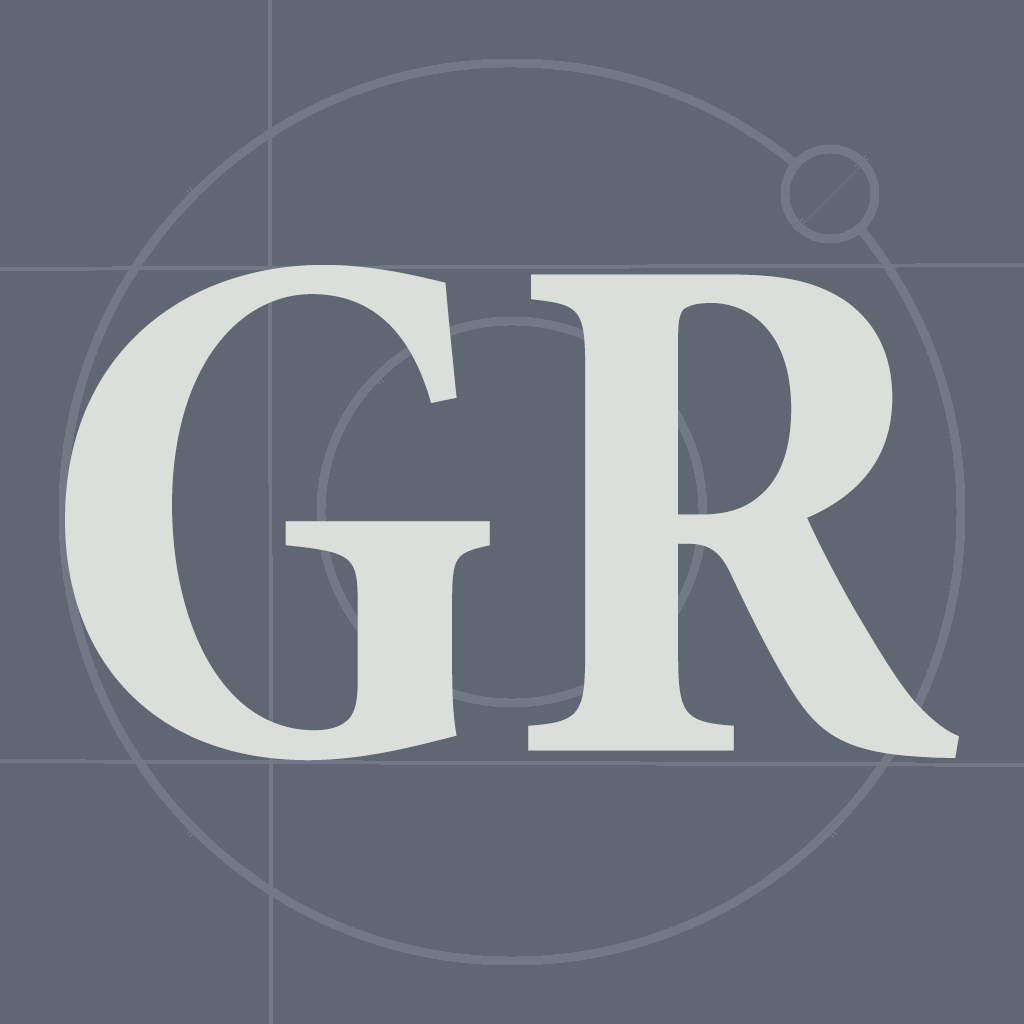
<style>
.page{position:relative;width:1024px;height:1024px;background:#5e6772}
.page>*{position:absolute;margin:0}
.t1{font:741px "MinionPro-BoldCn";color:#dadfd9;text-transform:uppercase}
</style>
<div class="page">
<p class="t1" style="left:65px;top:265px;width:894px;height:496px">Gr</p>
</div>
